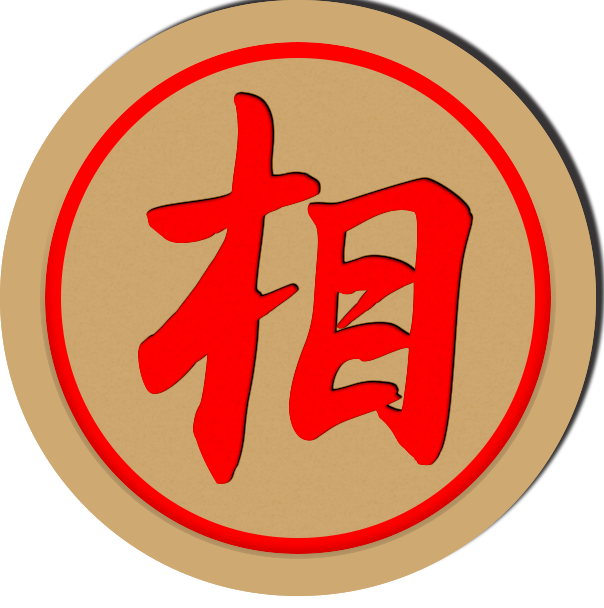
<style>
.page{position:relative;width:604px;height:608px;background:#ffffff}
.page>*{position:absolute;margin:0}
.t1{font:416.7px "AaYuwenlaoshidezi";letter-spacing:0.04em;color:#ff0000}
</style>
<div class="page">
<p class="t1" style="left:138px;top:93px;width:334px;height:391px;rotate:5deg">相</p>
<p class="t1" style="left:138px;top:93px;width:334px;height:391px;rotate:5deg">相</p>
</div>
